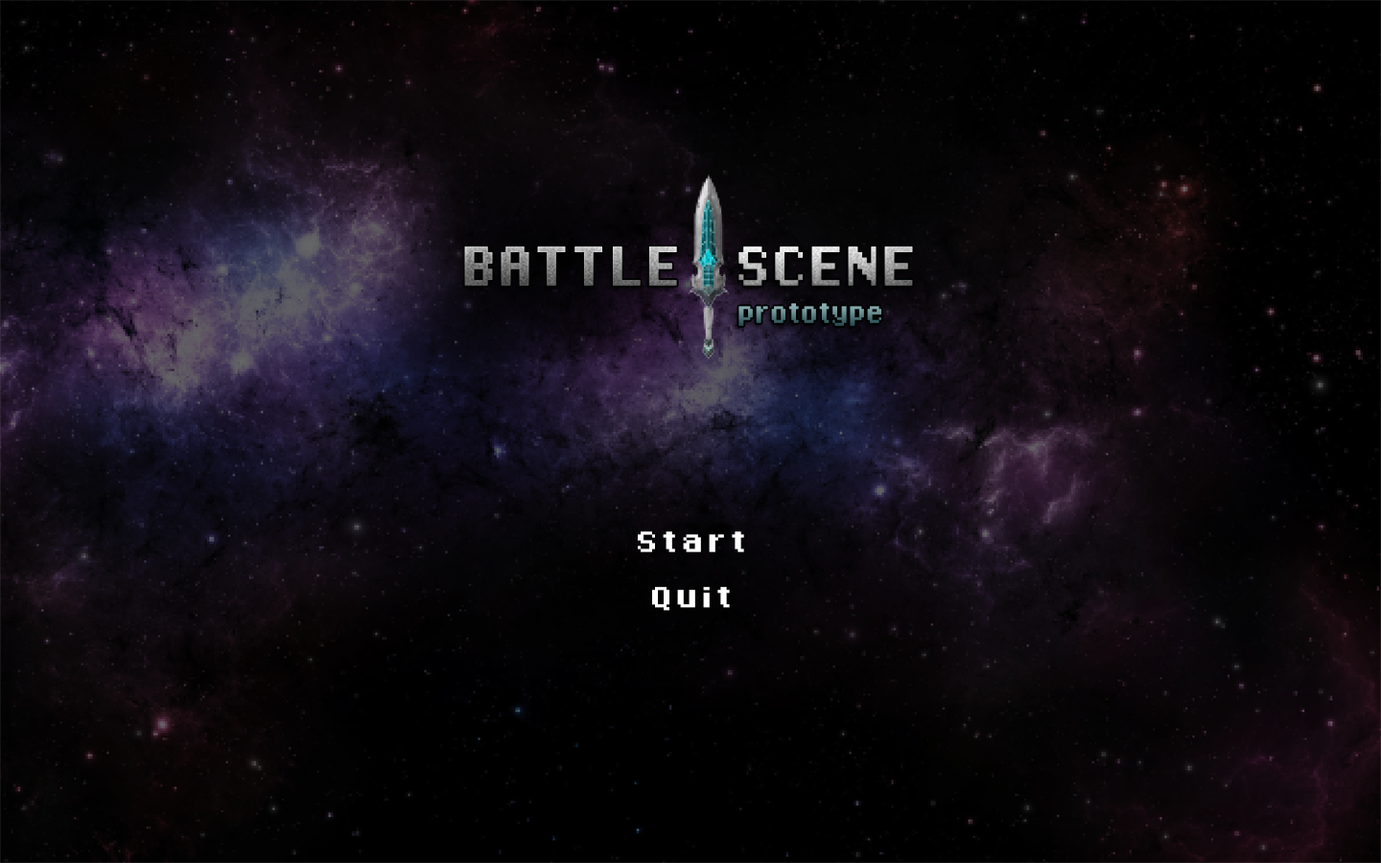
<style>
.page{position:relative;width:1381px;height:863px}
.page>*{position:absolute;margin:0}
.t1{font:88.7px "8-Bit-Madness";scale:0.82 1}
.t2{font:88.7px "8-Bit-Madness";letter-spacing:0.06em;scale:0.82 1}
.t3{font:88.7px "8-Bit-Madness";letter-spacing:0.02em;scale:0.82 1}
.t4{font:44.4px "8-Bit-Madness";letter-spacing:-0.02em;scale:0.82 1}
.t5{font:46px "8-Bit-Madness";letter-spacing:0.06em;color:#ffffff}
</style>
<div class="page">
<p class="t1" style="left:464px;top:247px;width:449px;height:39px">BA<span class="t2">T </span><span class="t3">T</span>LE    SCENE</p>
<p class="t4" style="left:739px;top:303px;width:143px;height:23px">prototype</p>
<p class="t5" style="left:638px;top:531px;width:106px;height:80px;text-align:center">Start<br>Quit</p>
</div>
